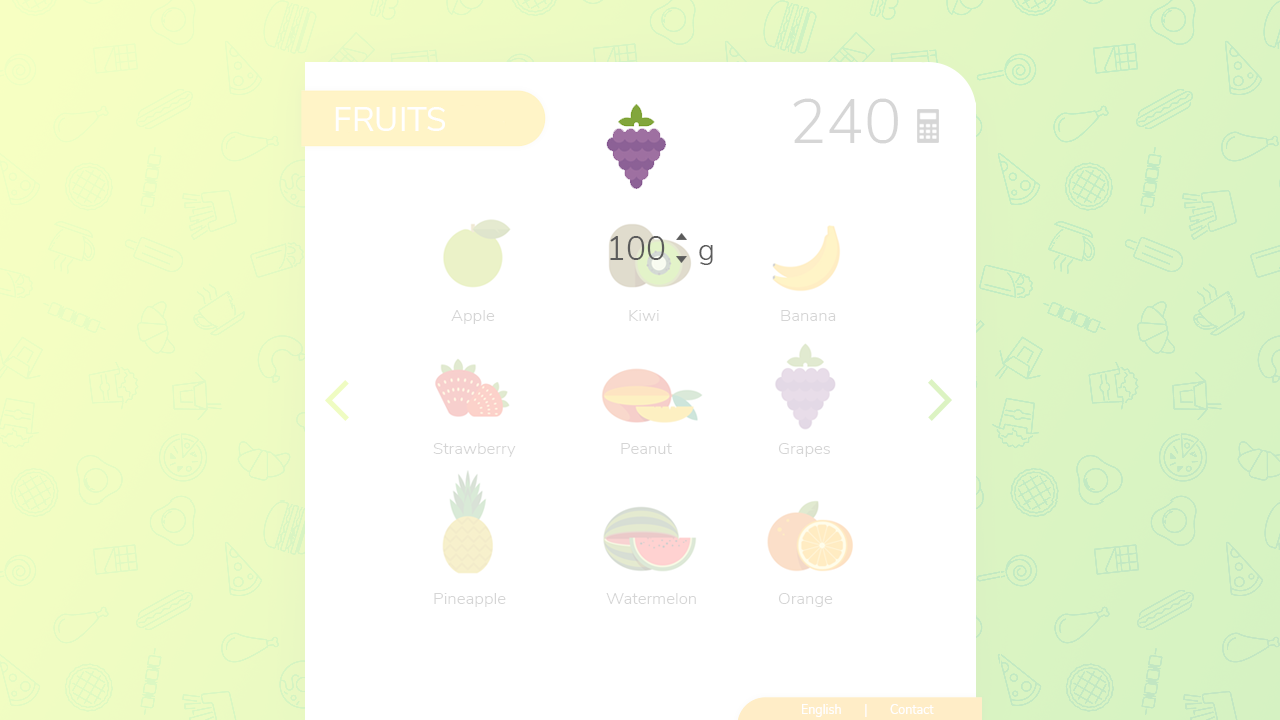
<style>
.page{position:relative;width:1280px;height:720px;background:#ffffff}
.page>*{position:absolute;margin:0}
.t1{font:62.5px "NunitoSans-Light";color:#d6d6d6}
.t2{font:33.3px "NunitoSans-Regular";color:#ffffff}
.t3{font:33.3px "NunitoSans-Light";color:#5b5b5b}
.t4{font:29.2px "NunitoSans-Light";color:#5b5b5b}
.t5{font:16.7px "NunitoSans-Light";color:#d5d5d5}
.t6{font:12.5px "NunitoSans-Regular";color:#ffffff}
</style>
<div class="page">
<p class="t1" style="left:793px;top:98px;width:105px;height:46px">240</p>
<p class="t2" style="left:335px;top:107px;width:110px;height:24px">FRUITS</p>
<p class="t3" style="left:610px;top:236px;width:103px;height:29px">100   <span class="t4">g</span></p>
<p class="t5" style="left:451px;top:310px;width:44px;height:14px">Apple</p>
<p class="t5" style="left:629px;top:310px;width:30px;height:11px">Kiwi</p>
<p class="t5" style="left:781px;top:310px;width:55px;height:11px">Banana</p>
<p class="t5" style="left:433px;top:443px;width:83px;height:14px">Strawberry</p>
<p class="t5" style="left:621px;top:443px;width:51px;height:11px">Peanut</p>
<p class="t5" style="left:778px;top:443px;width:52px;height:14px">Grapes</p>
<p class="t5" style="left:434px;top:593px;width:72px;height:14px">Pineapple</p>
<p class="t5" style="left:606px;top:593px;width:90px;height:11px">Watermelon</p>
<p class="t5" style="left:778px;top:593px;width:55px;height:14px">Orange</p>
<p class="t6" style="left:802px;top:704px;width:65px;height:13px">English       |</p>
<p class="t6" style="left:890px;top:704px;width:44px;height:10px">Contact</p>
</div>
